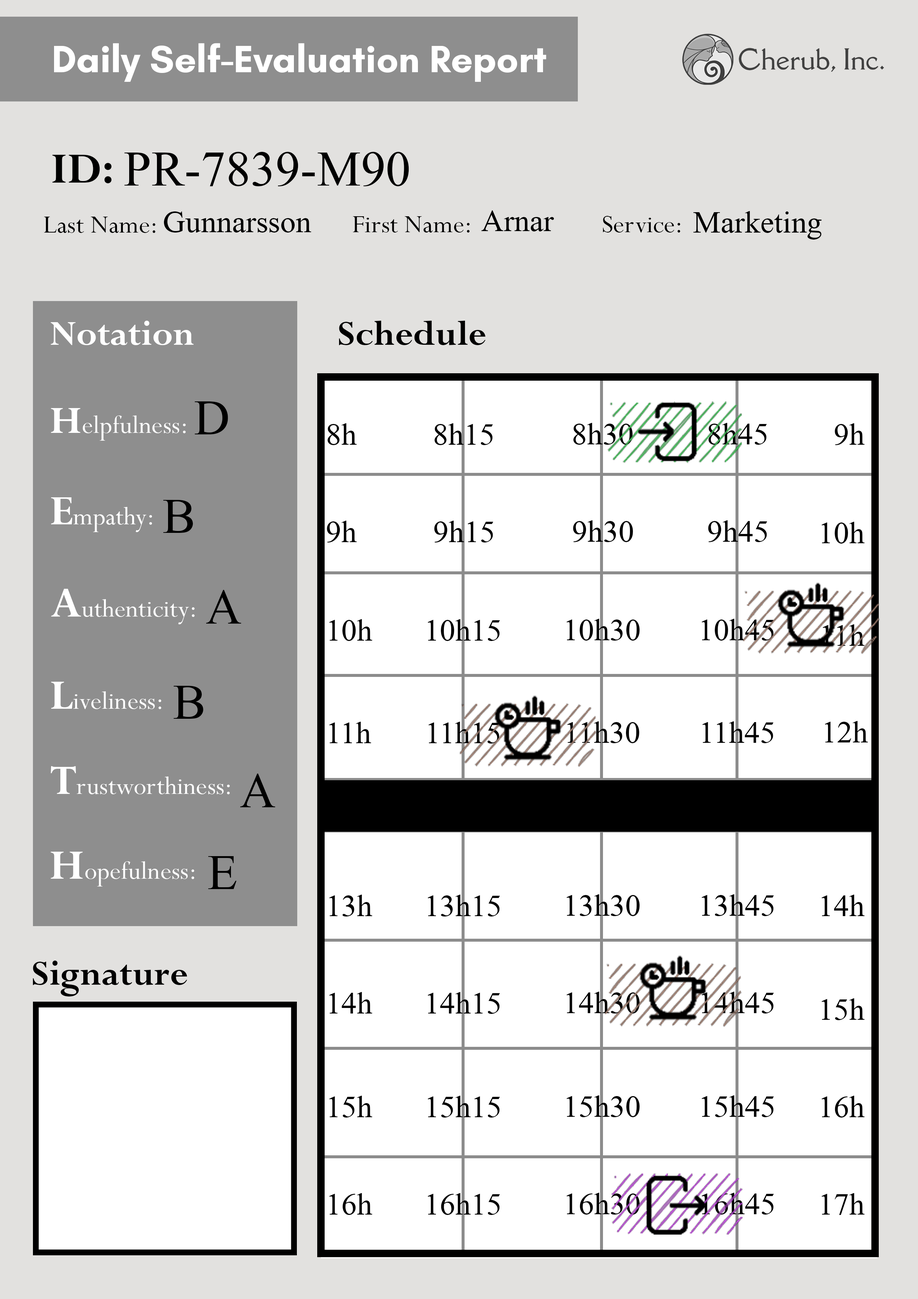
<style>
.page{position:relative;width:918px;height:1299px;background:#ffffff}
.page>*{position:absolute;margin:0}
.t1{font:74px "Microsoft-Himalaya";color:#000000}
.t2{font:46.3px "Microsoft-Himalaya";color:#000000}
</style>
<div class="page">
<p class="t1" style="left:124px;top:152px;width:285px;height:34px">PR-7839-M90</p>
<p class="t2" style="left:164px;top:211px;width:147px;height:21px">Gunnarsson</p>
<p class="t2" style="left:481px;top:210px;width:73px;height:21px">Arnar</p>
<p class="t2" style="left:693px;top:211px;width:129px;height:29px">Marketing</p>
<p class="t1" style="left:195px;top:401px;width:33px;height:33px">D</p>
<p class="t2" style="left:328px;top:423px;width:29px;height:22px">8h</p>
<p class="t2" style="left:435px;top:423px;width:58px;height:22px">8h15</p>
<p class="t2" style="left:573px;top:423px;width:60px;height:22px">8h30</p>
<p class="t2" style="left:709px;top:423px;width:58px;height:22px">8h45</p>
<p class="t2" style="left:835px;top:423px;width:30px;height:22px">9h</p>
<p class="t1" style="left:163px;top:500px;width:30px;height:33px">B</p>
<p class="t2" style="left:327px;top:521px;width:30px;height:21px">9h</p>
<p class="t2" style="left:434px;top:521px;width:60px;height:21px">9h15</p>
<p class="t2" style="left:573px;top:520px;width:60px;height:22px">9h30</p>
<p class="t2" style="left:708px;top:520px;width:59px;height:22px">9h45</p>
<p class="t2" style="left:822px;top:522px;width:43px;height:21px">10h</p>
<p class="t1" style="left:206px;top:590px;width:35px;height:33px">A</p>
<p class="t2" style="left:329px;top:619px;width:43px;height:22px">10h</p>
<p class="t2" style="left:428px;top:619px;width:72px;height:22px">10h15</p>
<p class="t2" style="left:566px;top:619px;width:74px;height:21px">10h30</p>
<p class="t2" style="left:702px;top:619px;width:72px;height:21px">10h45</p>
<p class="t2" style="left:823px;top:624px;width:42px;height:22px">11h</p>
<p class="t1" style="left:174px;top:686px;width:30px;height:33px">B</p>
<p class="t2" style="left:329px;top:722px;width:42px;height:21px">11h</p>
<p class="t2" style="left:428px;top:722px;width:72px;height:21px">11h15</p>
<p class="t2" style="left:567px;top:721px;width:72px;height:22px">11h30</p>
<p class="t2" style="left:702px;top:721px;width:72px;height:22px">11h45</p>
<p class="t2" style="left:825px;top:721px;width:43px;height:21px">12h</p>
<p class="t1" style="left:240px;top:773px;width:35px;height:34px">A</p>
<p class="t1" style="left:208px;top:856px;width:29px;height:33px">E</p>
<p class="t2" style="left:329px;top:894px;width:43px;height:22px">13h</p>
<p class="t2" style="left:428px;top:894px;width:72px;height:22px">13h15</p>
<p class="t2" style="left:566px;top:894px;width:74px;height:22px">13h30</p>
<p class="t2" style="left:702px;top:894px;width:72px;height:22px">13h45</p>
<p class="t2" style="left:822px;top:894px;width:43px;height:22px">14h</p>
<p class="t2" style="left:329px;top:992px;width:43px;height:21px">14h</p>
<p class="t2" style="left:428px;top:992px;width:72px;height:22px">14h15</p>
<p class="t2" style="left:566px;top:991px;width:74px;height:22px">14h30</p>
<p class="t2" style="left:702px;top:991px;width:72px;height:22px">14h45</p>
<p class="t2" style="left:822px;top:998px;width:43px;height:22px">15h</p>
<p class="t2" style="left:329px;top:1095px;width:43px;height:22px">15h</p>
<p class="t2" style="left:428px;top:1095px;width:72px;height:22px">15h15</p>
<p class="t2" style="left:566px;top:1095px;width:74px;height:22px">15h30</p>
<p class="t2" style="left:702px;top:1095px;width:72px;height:22px">15h45</p>
<p class="t2" style="left:822px;top:1095px;width:43px;height:22px">16h</p>
<p class="t2" style="left:329px;top:1193px;width:43px;height:22px">16h</p>
<p class="t2" style="left:428px;top:1193px;width:72px;height:22px">16h15</p>
<p class="t2" style="left:566px;top:1192px;width:74px;height:22px">16h30</p>
<p class="t2" style="left:702px;top:1192px;width:72px;height:22px">16h45</p>
<p class="t2" style="left:822px;top:1193px;width:43px;height:22px">17h</p>
</div>
